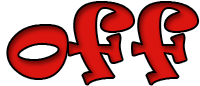
<style>
.page{position:relative;width:200px;height:86px;background:#ffffff}
.page>*{position:absolute;margin:0}
.t1{font:86.8px "Ravie"}
</style>
<div class="page">
<p class="t1" style="left:8px;top:3px;width:190px;height:81px">off</p>
</div>
